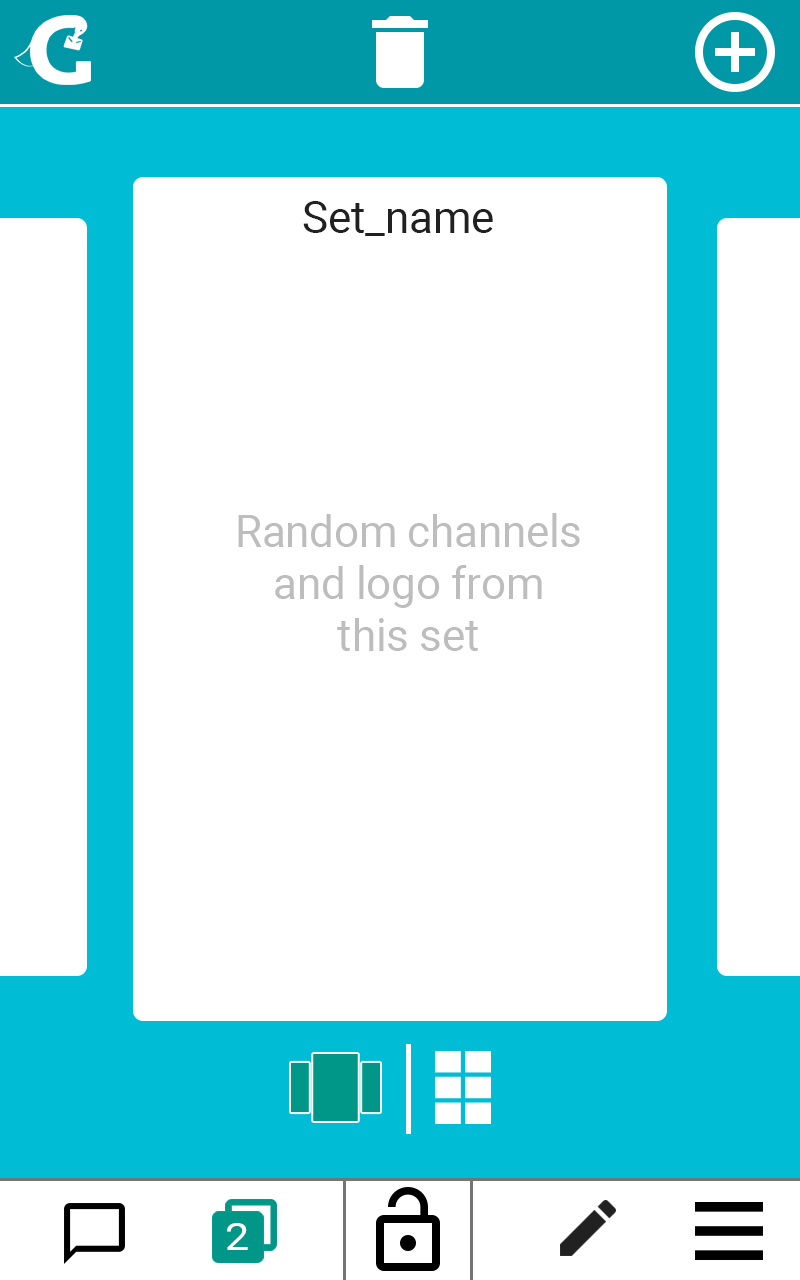
<style>
.page{position:relative;width:800px;height:1280px;background:#ffffff}
.page>*{position:absolute;margin:0}
.t1{font:43.5px "Roboto-Regular";color:#212121}
.t2{font:43.5px "Roboto-Regular";color:#bdbdbd}
.t3{font:37.5px "Roboto-Regular";color:#ffffff;scale:1.16 1}
</style>
<div class="page">
<p class="t1" style="left:303px;top:201px;width:190px;height:35px">Set_name</p>
<p class="t2" style="left:238px;top:513px;width:342px;height:138px;text-align:center">Random channels and logo from this set</p>
<p class="t3" style="left:227px;top:1223px;width:21px;height:27px">2</p>
</div>
